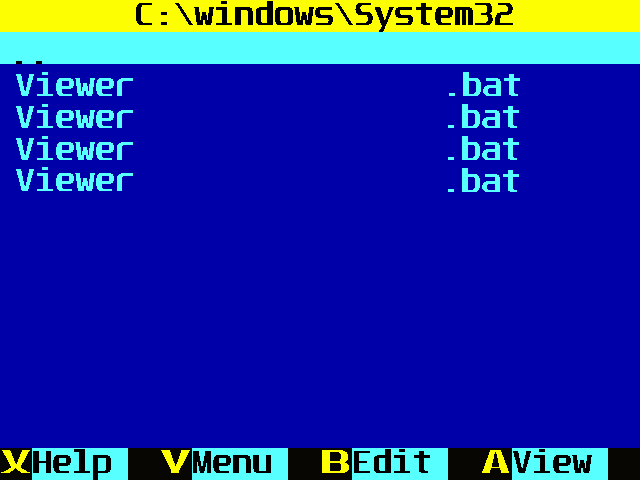
<style>
.page{position:relative;width:640px;height:480px;background:#0000a8}
.page>*{position:absolute;margin:0}
.t1{font:27.9px "Unispace-Bold";color:#000000;scale:1.17 1}
.t2{font:27.9px "Unispace-Bold";color:#57ffff;scale:1.17 1}
.t3{font:27.9px "Unispace-Bold";color:#fefe03;scale:1.84 1}
</style>
<div class="page">
<p class="t1" style="left:136px;top:1px;width:377px;height:31px">C:\windows\System32</p>
<p class="t1" style="left:16px;top:61px;width:26px;height:3px">..</p>
<p class="t2" style="left:16px;top:72px;width:117px;height:24px">Viewer</p>
<p class="t2" style="left:449px;top:72px;width:71px;height:24px">.bat</p>
<p class="t2" style="left:16px;top:104px;width:117px;height:24px">Viewer</p>
<p class="t2" style="left:448px;top:104px;width:71px;height:24px">.bat</p>
<p class="t2" style="left:16px;top:136px;width:117px;height:24px">Viewer</p>
<p class="t2" style="left:448px;top:136px;width:71px;height:24px">.bat</p>
<p class="t2" style="left:16px;top:167px;width:117px;height:24px">Viewer</p>
<p class="t2" style="left:448px;top:168px;width:71px;height:24px">.bat</p>
<p class="t1" style="left:33px;top:449px;width:78px;height:31px">Help</p>
<p class="t1" style="left:354px;top:449px;width:76px;height:24px">Edit</p>
<p class="t1" style="left:513px;top:449px;width:79px;height:24px">View</p>
<p class="t3" style="left:1px;top:450px;width:29px;height:23px">X</p>
<p class="t3" style="left:161px;top:450px;width:29px;height:23px">Y</p>
<p class="t1" style="left:193px;top:451px;width:78px;height:22px">Menu</p>
<p class="t3" style="left:322px;top:450px;width:27px;height:23px">B</p>
<p class="t3" style="left:482px;top:450px;width:27px;height:23px">A</p>
</div>
